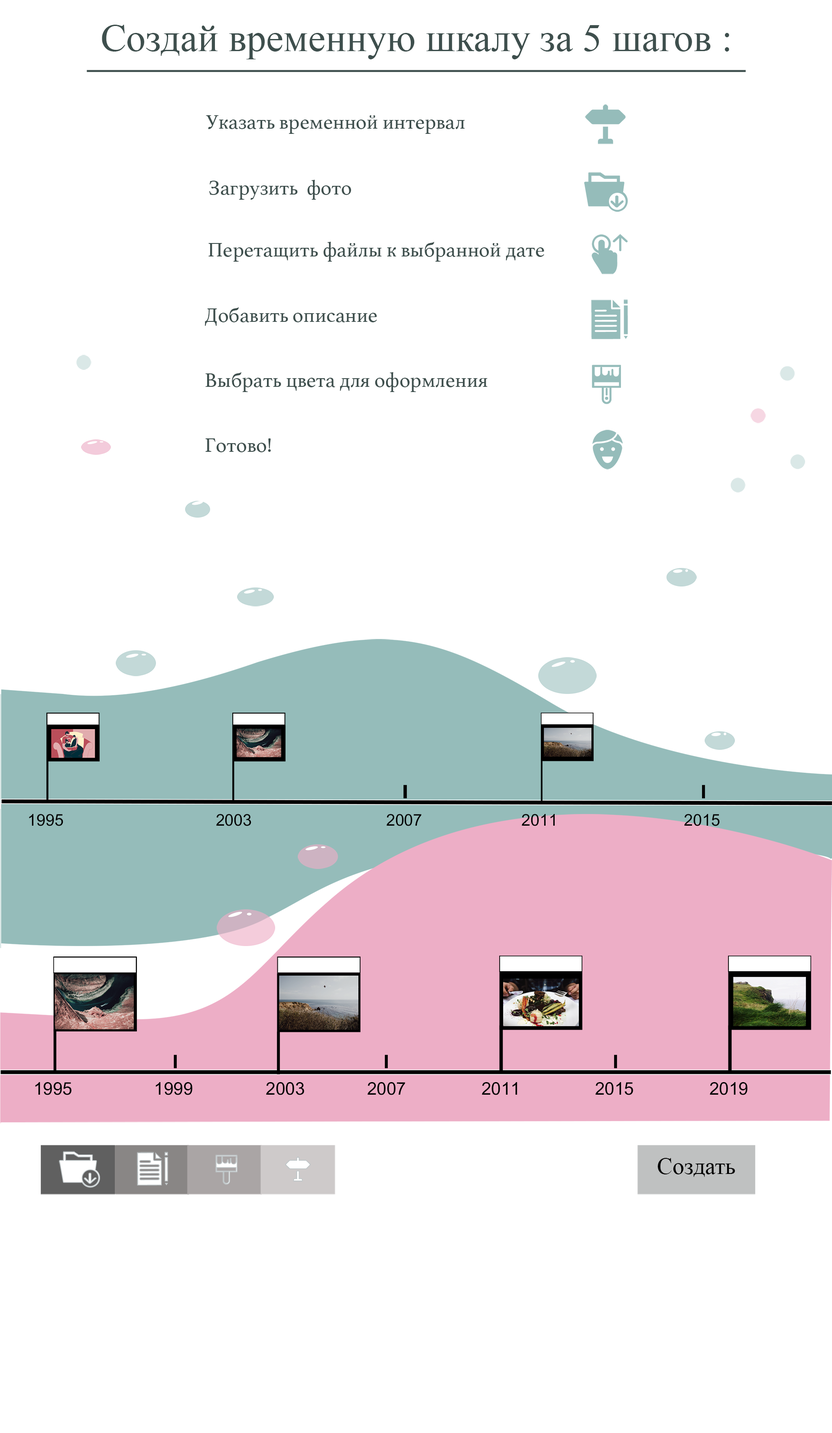
<style>
.page{position:relative;width:832px;height:1433px;background:#ffffff}
.page>*{position:absolute;margin:0}
.t1{font:39px "TimesNewRomanPSMT";color:#3e4f4d}
.t2{font:20.8px "Athelas-Regular";color:#3e4f4d}
.t3{font:16.2px "ArialMT";color:#000000}
.t4{font:17.5px "ArialMT";color:#000000}
.t5{font:23.4px "TimesNewRomanPSMT";color:#000000}
</style>
<div class="page">
<p class="t1" style="left:102px;top:25px;width:627px;height:34px">Создай временную шкалу за 5 шагов :</p>
<p class="t2" style="left:206px;top:115px;width:259px;height:19px">Указать временной интервал</p>
<p class="t2" style="left:209px;top:180px;width:142px;height:20px">Загрузить  фото</p>
<p class="t2" style="left:208px;top:242px;width:336px;height:20px">Перетащить файлы к выбранной дате</p>
<p class="t2" style="left:205px;top:307px;width:172px;height:19px">Добавить описание</p>
<p class="t2" style="left:205px;top:372px;width:282px;height:20px">Выбрать цвета для оформления</p>
<p class="t2" style="left:205px;top:438px;width:66px;height:14px">Готово!</p>
<p class="t3" style="left:29px;top:814px;width:34px;height:12px">1995</p>
<p class="t3" style="left:216px;top:814px;width:35px;height:12px">2003</p>
<p class="t3" style="left:386px;top:814px;width:36px;height:12px">2007</p>
<p class="t3" style="left:522px;top:814px;width:33px;height:12px">2011</p>
<p class="t3" style="left:684px;top:814px;width:36px;height:12px">2015</p>
<p class="t4" style="left:35px;top:1082px;width:36px;height:13px">1995</p>
<p class="t4" style="left:156px;top:1082px;width:36px;height:13px">1999</p>
<p class="t4" style="left:266px;top:1082px;width:38px;height:13px">2003</p>
<p class="t4" style="left:367px;top:1082px;width:38px;height:13px">2007</p>
<p class="t4" style="left:482px;top:1082px;width:35px;height:13px">2011</p>
<p class="t4" style="left:595px;top:1082px;width:38px;height:13px">2015</p>
<p class="t4" style="left:710px;top:1082px;width:37px;height:13px">2019</p>
<p class="t5" style="left:658px;top:1158px;width:77px;height:19px">Создать</p>
</div>
